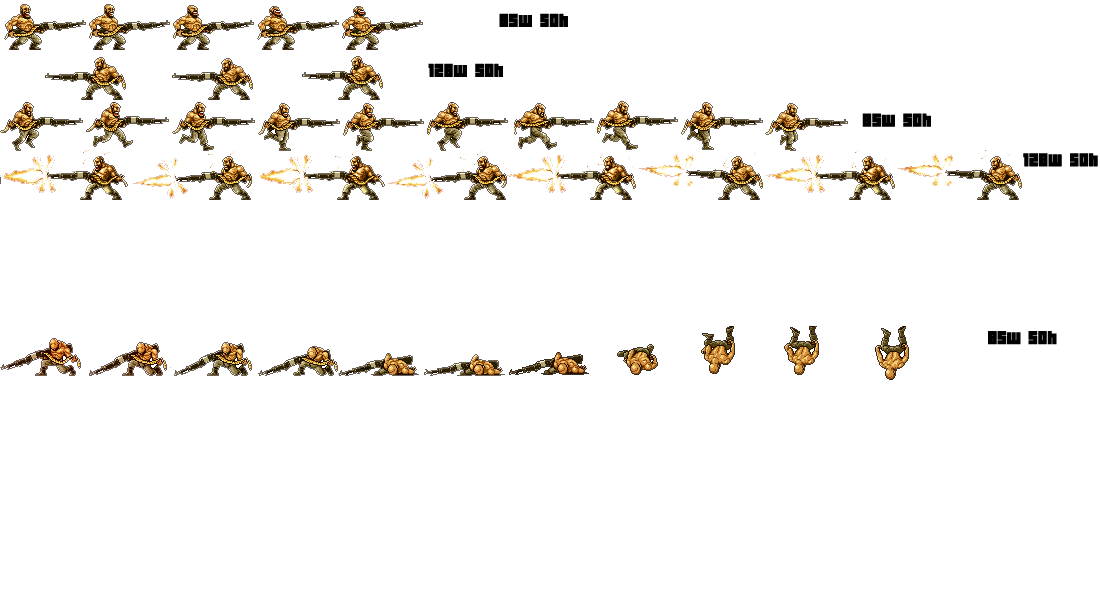
<style>
.page{position:relative;width:1100px;height:600px;background:#ffffff}
.page>*{position:absolute;margin:0}
.t1{font:12px "04b19";color:#000000;font-weight:bold}
</style>
<div class="page">
<p class="t1" style="left:499px;top:13px;width:69px;height:14px">85w 50h</p>
<p class="t1" style="left:428px;top:63px;width:75px;height:14px">128w 50h</p>
<p class="t1" style="left:862px;top:113px;width:69px;height:14px">85w 50h</p>
<p class="t1" style="left:1023px;top:153px;width:75px;height:14px">128w 50h</p>
<p class="t1" style="left:988px;top:331px;width:69px;height:14px">85w 50h</p>
</div>
